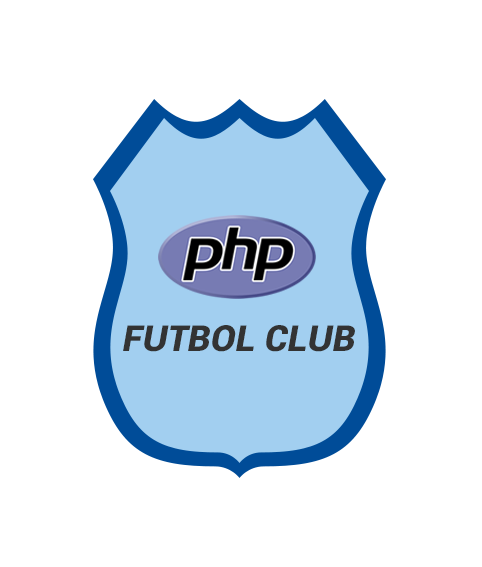
<style>
.page{position:relative;width:482px;height:567px;background:#ffffff}
.page>*{position:absolute;margin:0}
.t1{font:36px "Roboto-Black";color:#333333;font-style:italic}
</style>
<div class="page">
<p class="t1" style="left:123px;top:325px;width:232px;height:27px">FUTBOL CLUB</p>
</div>
